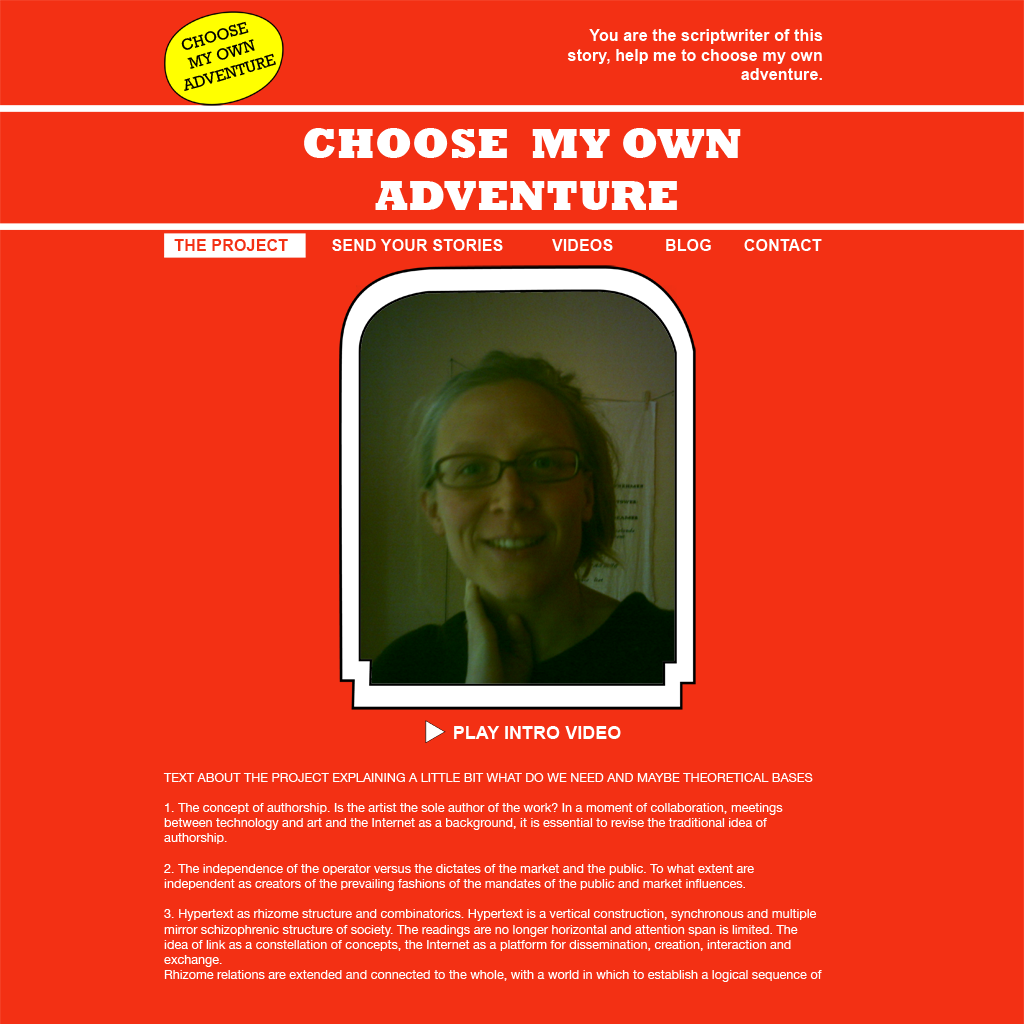
<style>
.page{position:relative;width:1024px;height:1024px;background:#f33014}
.page>*{position:absolute;margin:0}
.t1{font:16.3px "Rockwell";color:#000000}
.t2{font:16.3px "Arial-BoldMT";color:#ffffff}
.t3{font:43.4px "Rockwell-ExtraBold";color:#ffffff}
.t4{font:16.3px "Arial-BoldMT";color:#f33014}
.t5{font:18.1px "Arial-BoldMT";color:#ffffff}
.t6{font:12.6px "HelveticaNeue";color:#ffffff}
</style>
<div class="page">
<p class="t1" style="left:181px;top:21px;width:95px;height:70px;text-align:center;rotate:-16deg">CHOOSE  <br>MY OWN <br>ADVENTURE</p>
<p class="t2" style="left:567px;top:29px;width:256px;height:51px;text-align:right">You are the scriptwriter of this story, help me to choose my own adventure.</p>
<p class="t3" style="left:304px;top:128px;width:437px;height:82px;text-align:center">CHOOSE  MY OWN <br>ADVENTURE</p>
<p class="t4" style="left:174px;top:239px;width:114px;height:12px">THE PROJECT</p>
<p class="t4" style="left:174px;top:239px;width:114px;height:12px">THE PROJECT</p>
<p class="t2" style="left:332px;top:239px;width:171px;height:12px">SEND YOUR STORIES</p>
<p class="t2" style="left:552px;top:239px;width:61px;height:12px">VIDEOS</p>
<p class="t2" style="left:666px;top:239px;width:45px;height:12px">BLOG</p>
<p class="t2" style="left:744px;top:239px;width:78px;height:12px">CONTACT</p>
<p class="t5" style="left:454px;top:726px;width:167px;height:13px">PLAY INTRO VIDEO</p>
<p class="t6" style="left:163px;top:773px;width:659px;height:209px">TEXT ABOUT THE PROJECT EXPLAINING A LITTLE BIT WHAT DO WE NEED AND MAYBE THEORETICAL BASES<br><br>1. The concept of authorship. Is the artist the sole author of the work? In a moment of collaboration, meetings between technology and art and the Internet as a background, it is essential to revise the traditional idea of authorship.<br><br>2. The independence of the operator versus the dictates of the market and the public. To what extent are independent as creators of the prevailing fashions of the mandates of the public and market influences.<br><br>3. Hypertext as rhizome structure and combinatorics. Hypertext is a vertical construction, synchronous and multiple mirror schizophrenic structure of society. The readings are no longer horizontal and attention span is limited. The idea of link as a constellation of concepts, the Internet as a platform for dissemination, creation, interaction and exchange.<br>Rhizome relations are extended and connected to the whole, with a world in which to establish a logical sequence of "Y", the juxtaposition and dialogue between the parties that are connected: Cross Movement, connection, palimpsest, Hypertext: Rhizome. = I still haven’t understood that completely? Maybe you can say something to that? - But I also will keep investing into that<br><br>4. The idea of submission, the submissive always carries out the instructions of his master, but the latter is manipulated in exactly that order through the other what the submissive wants to do.<br><br>5. The ability to embody the figure of a performer. Not only actor of the idea, but an interpreter in a broad sense, resulting in part by translating the suggestions of users of the web. = are actors not always doing that? they integrate it in their own persona, interpret it? Can you explain me once more what you mean?<br><br>6. The work of art. In developing the daily work and subject to a timetable and a deadline, it generates a reflection on the artist as a worker. Goes every day to the post, setting out its proposals, analyzes them, make them, the exhibits. <br><br>-</p>
</div>
